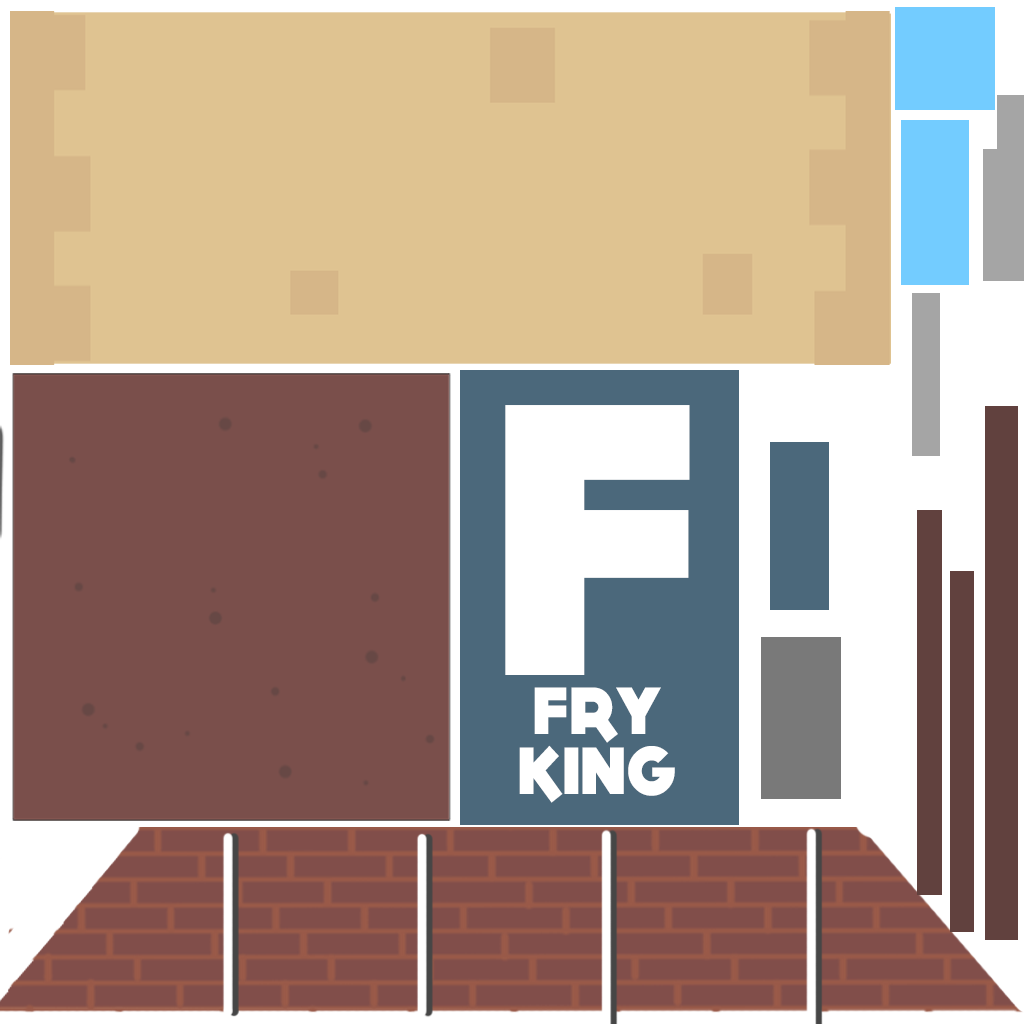
<style>
.page{position:relative;width:1024px;height:1024px;background:#dfc391}
.page>*{position:absolute;margin:0}
.t1{font:67px/60px "DOCK11-Heavy";color:#ffffff;scale:0.94 1}
.t2{font:388.9px/29.1px "DOCK11-Heavy";color:#ffffff;scale:0.94 1}
.t3{font:67px/29.1px "DOCK11-Heavy";color:#ffffff;scale:0.94 1}
.t4{font:67px/30.1px "DOCK11-Heavy";color:#ffffff;scale:0.94 1}
</style>
<div class="page">
<p class="t1" style="left:505px;top:405px;width:185px;height:398px;text-align:center"><span class="t2">F<br></span><span class="t3"><br>F</span><span class="t4">RY<br></span>KING</p>
</div>
